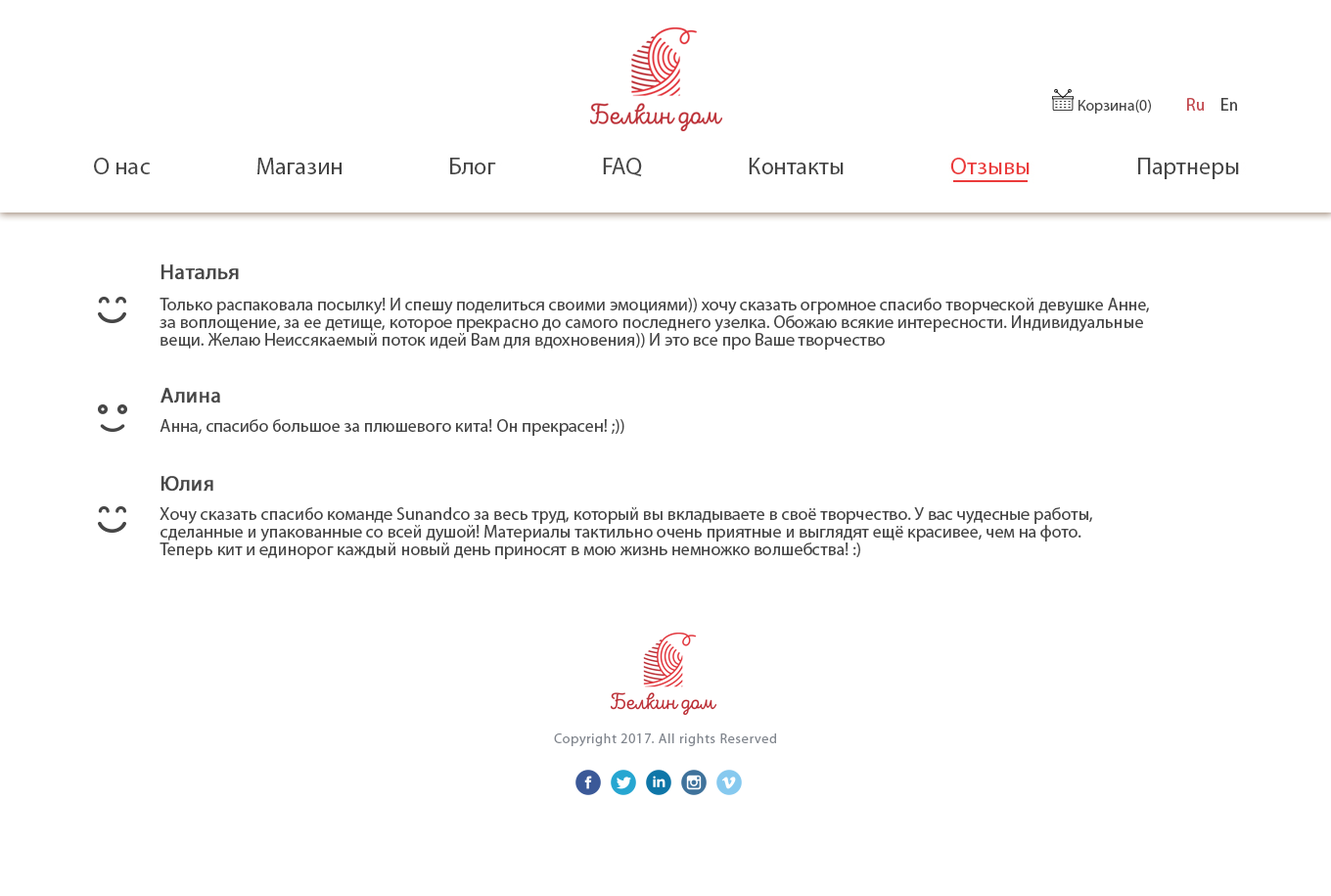
<style>
.page{position:relative;width:1331px;height:896px;background:#ffffff}
.page>*{position:absolute;margin:0}
.t1{font:17.6px/17.6px "MyriadPro-Regular";color:#464646}
.t2{font:21.5px/11.7px "MyriadPro-Regular";color:#464646;font-weight:bold}
.t3{font:13.7px "MyriadPro-Regular";letter-spacing:0.05em;color:#81868e}
</style>
<div class="page">
<p class="t1" style="left:160px;top:264px;width:989px;height:85px"><span class="t2">Наталья<br><br></span>Только распаковала посылку! И спешу поделиться своими эмоциями)) хочу сказать огромное спасибо творческой девушке Анне, <br>за воплощение, за ее детище, которое прекрасно до самого последнего узелка. Обожаю всякие интересности. Индивидуальные <br>вещи. Желаю Неиссякаемый поток идей Вам для вдохновения)) И это все про Ваше творчество</p>
<p class="t1" style="left:160px;top:388px;width:465px;height:48px"><span class="t2">Алина<br><br></span>Анна, спасибо большое за плюшевого кита! Он прекрасен! ;))</p>
<p class="t1" style="left:160px;top:476px;width:932px;height:83px"><span class="t2">Юлия<br><br></span>Хочу сказать спасибо команде Sunandco за весь труд, который вы вкладываете в своё творчество. У вас чудесные работы, <br>сделанные и упакованные со всей душой! Материалы тактильно очень приятные и выглядят ещё красивее, чем на фото. <br>Теперь кит и единорог каждый новый день приносят в мою жизнь немножко волшебства! :)</p>
<p class="t3" style="left:554px;top:733px;width:222px;height:13px">Copyright 2017. All rights Reserved</p>
</div>
